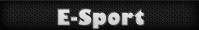
<style>
.page{position:relative;width:199px;height:30px}
.page>*{position:absolute;margin:0}
.t1{font:21.3px "GillSans-UltraBold";color:#d5d5d5;scale:0.89 1}
</style>
<div class="page">
<p class="t1" style="left:57px;top:8px;width:87px;height:21px">E-Sport</p>
</div>
